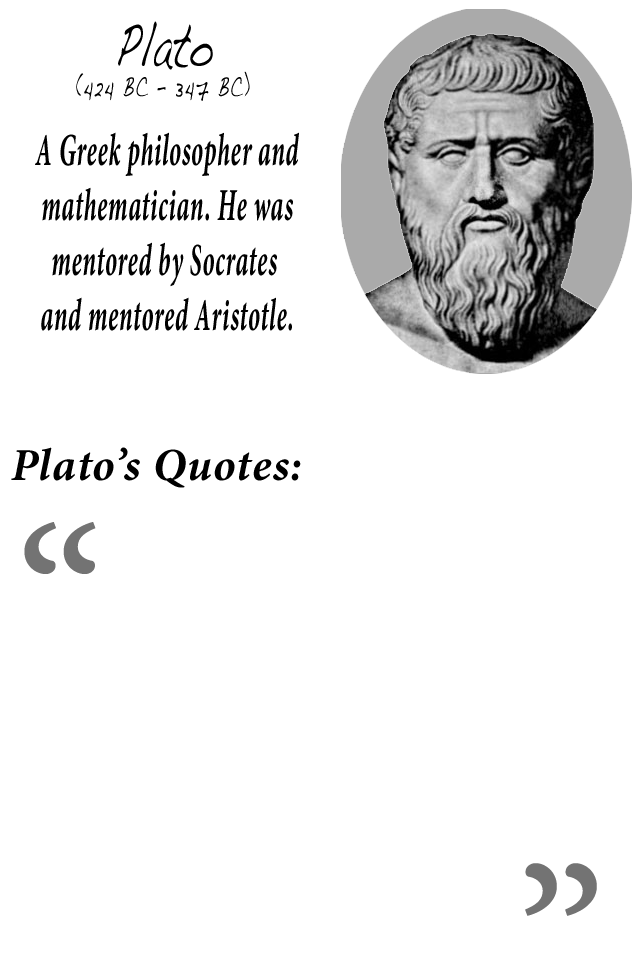
<style>
.page{position:relative;width:640px;height:960px;background:#ffffff}
.page>*{position:absolute;margin:0}
.t1{font:63.7px "Handwriting-Dakota";letter-spacing:0.03em;color:#000000;scale:0.59 1}
.t2{font:29.2px "Handwriting-Dakota";letter-spacing:0.03em;color:#000000;scale:0.63 1}
.t3{font:45.8px "MinionPro-BoldIt";letter-spacing:0.03em;color:#000000;scale:0.53 1}
.t4{font:45.8px "MinionPro-BoldIt";letter-spacing:0.03em;color:#000000}
.t5{font:225px "MinionPro-Regular";letter-spacing:0.03em;color:#737373}
</style>
<div class="page">
<p class="t1" style="left:118px;top:21px;width:95px;height:49px">Plato</p>
<p class="t2" style="left:76px;top:71px;width:174px;height:30px">(424 BC – 347 BC)</p>
<p class="t3" style="left:35px;top:132px;width:264px;height:199px;text-align:center">A Greek philosopher and<br>mathematician. He was<br>mentored by Socrates <br>and mentored Aristotle.</p>
<p class="t4" style="left:11px;top:447px;width:290px;height:41px">Plato’s Quotes:</p>
<p class="t5" style="left:24px;top:522px;width:72px;height:52px">“</p>
<p class="t5" style="left:525px;top:863px;width:72px;height:53px">”</p>
</div>
